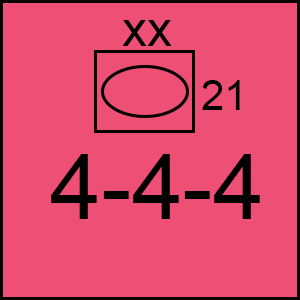
<style>
.page{position:relative;width:300px;height:300px;background:#ee4f74}
.page>*{position:absolute;margin:0}
.t1{font:50px "ArialMT";color:#000000}
.t2{font:41.7px "ArialMT";color:#000000}
.t3{font:91.7px "ArialMT";color:#000000}
</style>
<div class="page">
<p class="t1" style="left:122px;top:20px;width:50px;height:26px">xx</p>
<p class="t2" style="left:202px;top:80px;width:38px;height:30px">21</p>
<p class="t3" style="left:51px;top:154px;width:209px;height:65px">4-4-4</p>
</div>
